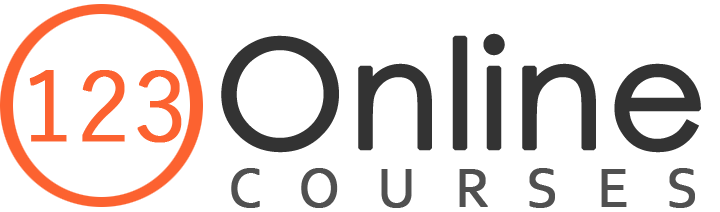
<style>
.page{position:relative;width:720px;height:212px;background:#ffffff}
.page>*{position:absolute;margin:0}
.t1{font:150px "CenturyGothic";color:#333333;font-weight:bold}
.t2{font:96px "YuGothic-Regular";color:#fc6230;font-weight:bold}
.t3{font:56px "Corbel";color:#505050;font-weight:bold}
</style>
<div class="page">
<p class="t1" style="left:221px;top:33px;width:480px;height:120px">Online</p>
<p class="t2" style="left:29px;top:70px;width:153px;height:73px">123</p>
<p class="t3" style="left:231px;top:168px;width:464px;height:40px">C   O   U   R   S   E   S</p>
</div>
